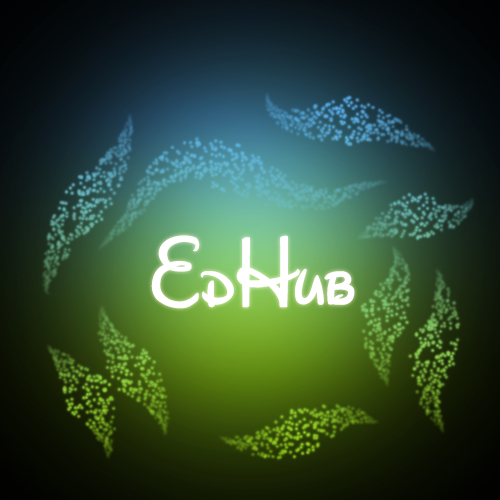
<style>
.page{position:relative;width:500px;height:500px}
.page>*{position:absolute;margin:0}
.t1{font:95px "WaltDisneyScriptv4.1";color:#ffffff}
</style>
<div class="page">
<p class="t1" style="left:151px;top:235px;width:204px;height:74px">EdHub</p>
</div>
